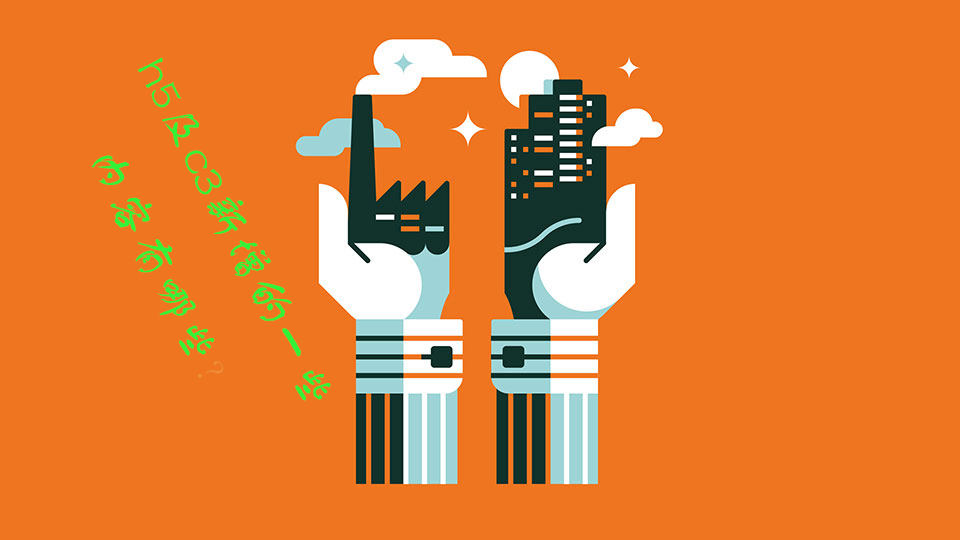
<style>
.page{position:relative;width:960px;height:540px;background:#ef7520}
.page>*{position:absolute;margin:0}
.t1{font:48px "FZSTK--GBK1-0";color:#30f238}
.t2{font:36px "FZSTK--GBK1-0";color:#ee8e38}
</style>
<div class="page">
<p class="t1" style="left:91px;top:57px;width:240px;height:344px;rotate:63deg">h5及c3新增的一些内容有哪些<span class="t2">？</span></p>
</div>
